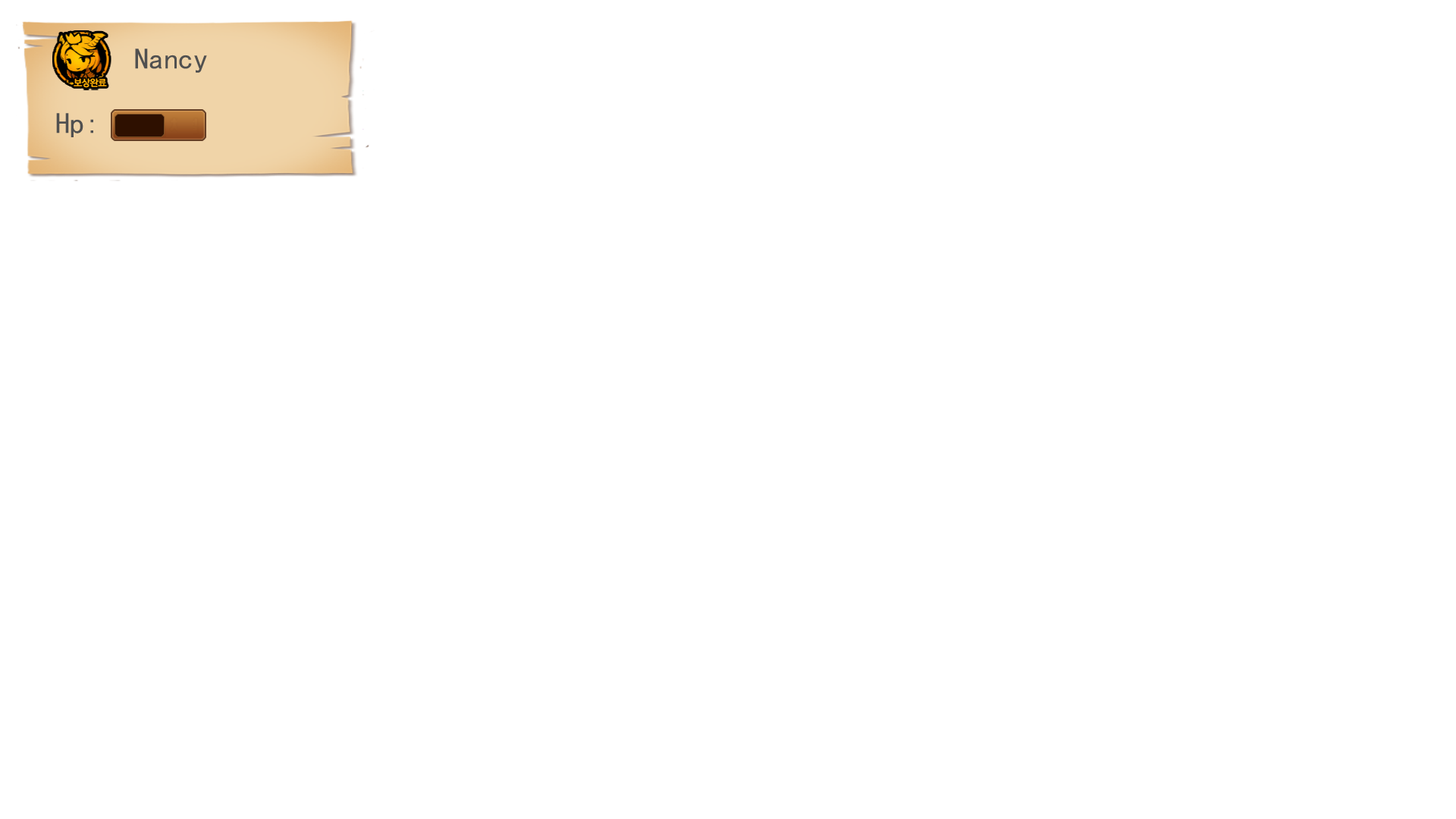
<style>
.page{position:relative;width:1456px;height:819px;background:#ffffff}
.page>*{position:absolute;margin:0}
.t1{font:29.6px "SimHei";color:#505050}
</style>
<div class="page">
<p class="t1" style="left:135px;top:49px;width:72px;height:24px">Nancy</p>
<p class="t1" style="left:56px;top:113px;width:37px;height:24px">Hp:</p>
</div>
